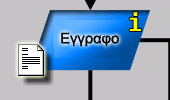
<style>
.page{position:relative;width:170px;height:100px;background:#c6c3c6}
.page>*{position:absolute;margin:0}
.t1{font:14.7px "ArialMT";color:#000000}
</style>
<div class="page">
<p class="t1" style="left:61px;top:32px;width:58px;height:15px">Εγγραφο</p>
</div>
